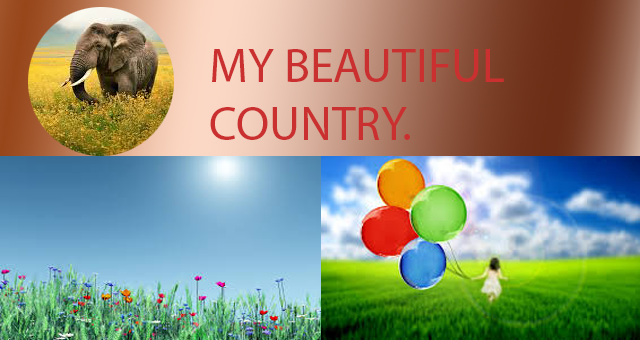
<style>
.page{position:relative;width:640px;height:340px}
.page>*{position:absolute;margin:0}
.t1{font:48px "MyriadPro-Regular";color:#ca3030}
</style>
<div class="page">
<p class="t1" style="left:210px;top:49px;width:294px;height:91px">MY BEAUTIFUL<br>COUNTRY.</p>
</div>
